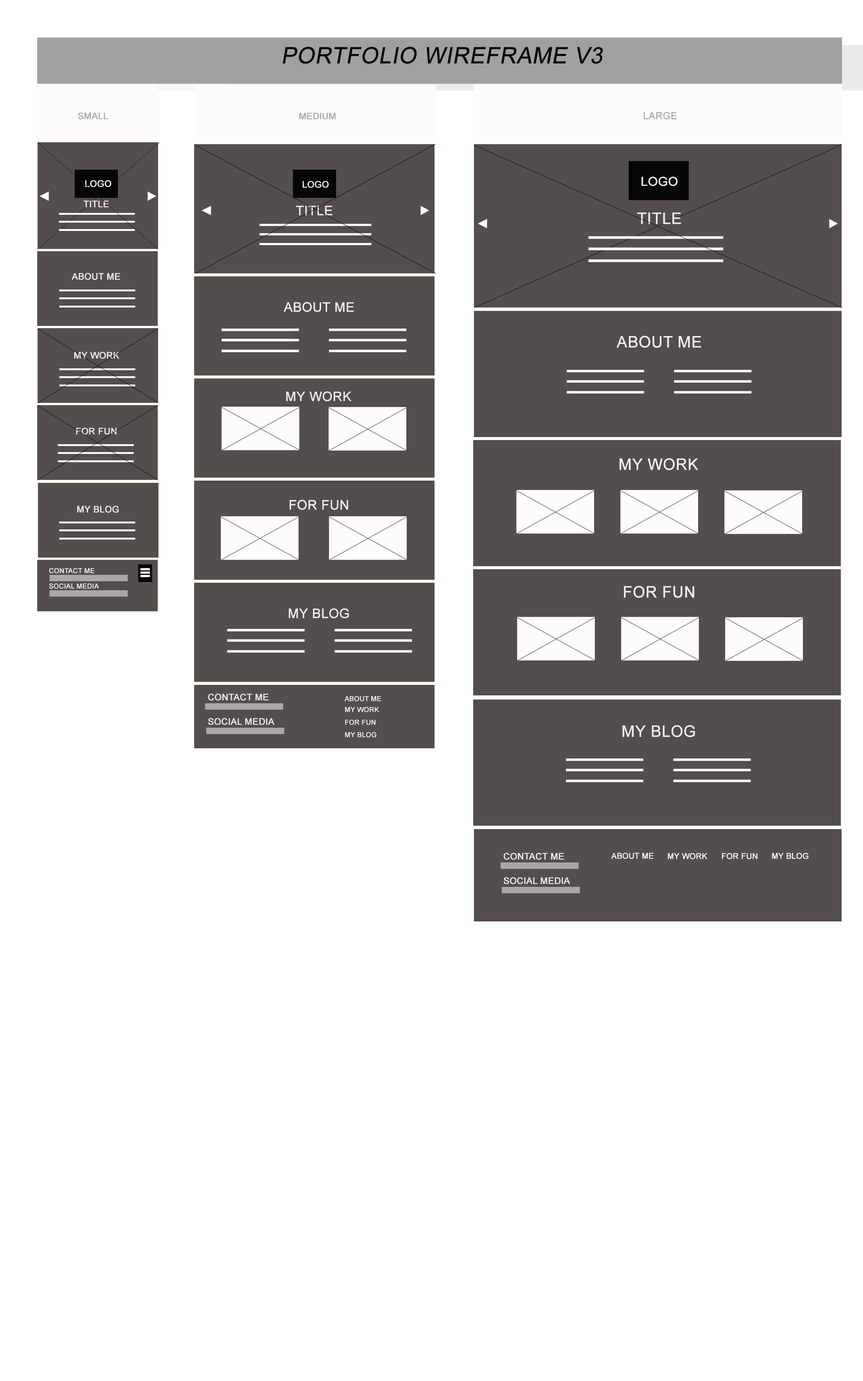
<style>
.page{position:relative;width:863px;height:1381px;background:#ffffff}
.page>*{position:absolute;margin:0}
.t1{font:22.5px "ArialMT";color:#090808;text-transform:uppercase;font-weight:bold;font-style:italic}
.t2{font:9px "ArialMT";color:#aaa7a7;text-transform:uppercase;font-weight:bold}
.t3{font:8.9px "ArialMT";color:#aaa7a7;text-transform:uppercase;font-weight:bold}
.t4{font:9.8px "ArialMT";color:#aaa7a7;text-transform:uppercase;font-weight:bold}
.t5{font:9px "ArialMT";color:#f1efef;text-transform:uppercase;font-weight:bold}
.t6{font:12.5px "ArialMT";color:#f1efef;text-transform:uppercase;font-weight:bold}
.t7{font:13.1px "ArialMT";color:#f1efef;text-transform:uppercase;font-weight:bold}
.t8{font:15.9px "ArialMT";color:#f1efef;text-transform:uppercase;font-weight:bold}
.t9{font:6.8px "ArialMT";color:#f1efef;text-transform:uppercase;font-weight:bold}
.t10{font:7.9px "ArialMT";color:#fdfbfb;font-weight:bold}
</style>
<div class="page">
<p class="t1" style="left:282px;top:47px;width:321px;height:17px">Portfolio Wireframe V3</p>
<p class="t2" style="left:78px;top:112px;width:30px;height:7px">small</p>
<p class="t3" style="left:299px;top:113px;width:37px;height:6px">Medium</p>
<p class="t4" style="left:644px;top:112px;width:33px;height:7px">large</p>
<p class="t5" style="left:85px;top:180px;width:26px;height:7px">logo</p>
<p class="t5" style="left:303px;top:181px;width:26px;height:7px">logo</p>
<p class="t6" style="left:642px;top:177px;width:36px;height:9px">logo</p>
<p class="t5" style="left:83px;top:201px;width:26px;height:6px">title</p>
<p class="t7" style="left:296px;top:206px;width:36px;height:10px">title</p>
<p class="t8" style="left:637px;top:213px;width:44px;height:11px">title</p>
<p class="t5" style="left:72px;top:273px;width:48px;height:7px">About me</p>
<p class="t7" style="left:284px;top:302px;width:70px;height:10px">About me</p>
<p class="t8" style="left:617px;top:336px;width:84px;height:12px">About me</p>
<p class="t5" style="left:74px;top:352px;width:45px;height:7px">my work</p>
<p class="t7" style="left:286px;top:391px;width:66px;height:11px">my work</p>
<p class="t5" style="left:76px;top:428px;width:41px;height:7px">for fun</p>
<p class="t8" style="left:619px;top:458px;width:80px;height:12px">my work</p>
<p class="t5" style="left:77px;top:506px;width:42px;height:7px">my blog</p>
<p class="t7" style="left:290px;top:500px;width:58px;height:10px">for fun</p>
<p class="t9" style="left:49px;top:568px;width:46px;height:6px">contact me</p>
<p class="t9" style="left:49px;top:584px;width:50px;height:5px">Social media</p>
<p class="t8" style="left:624px;top:586px;width:71px;height:12px">for fun</p>
<p class="t7" style="left:289px;top:608px;width:60px;height:11px">my blog</p>
<p class="t5" style="left:208px;top:694px;width:61px;height:7px">contact me</p>
<p class="t9" style="left:344px;top:696px;width:37px;height:6px">about me</p>
<p class="t9" style="left:345px;top:707px;width:34px;height:6px">my work</p>
<p class="t5" style="left:208px;top:718px;width:67px;height:7px">Social media</p>
<p class="t9" style="left:345px;top:720px;width:31px;height:5px">for fun</p>
<p class="t8" style="left:622px;top:725px;width:73px;height:12px">my blog</p>
<p class="t9" style="left:345px;top:732px;width:31px;height:6px">my blog</p>
<p class="t5" style="left:504px;top:853px;width:60px;height:7px">contact me</p>
<p class="t10" style="left:611px;top:853px;width:43px;height:6px">ABOUT ME</p>
<p class="t10" style="left:668px;top:853px;width:40px;height:6px">MY WORK</p>
<p class="t10" style="left:722px;top:853px;width:36px;height:6px">FOR FUN</p>
<p class="t10" style="left:772px;top:853px;width:37px;height:6px">MY BLOG</p>
<p class="t5" style="left:504px;top:877px;width:66px;height:8px">Social media</p>
</div>
